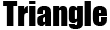
<style>
.page{position:relative;width:110px;height:30px;background:#ffffff}
.page>*{position:absolute;margin:0}
.t1{font:30.6px "Impact";color:#000000}
</style>
<div class="page">
<p class="t1" style="left:3px;top:1px;width:104px;height:28px">Triangle</p>
</div>
